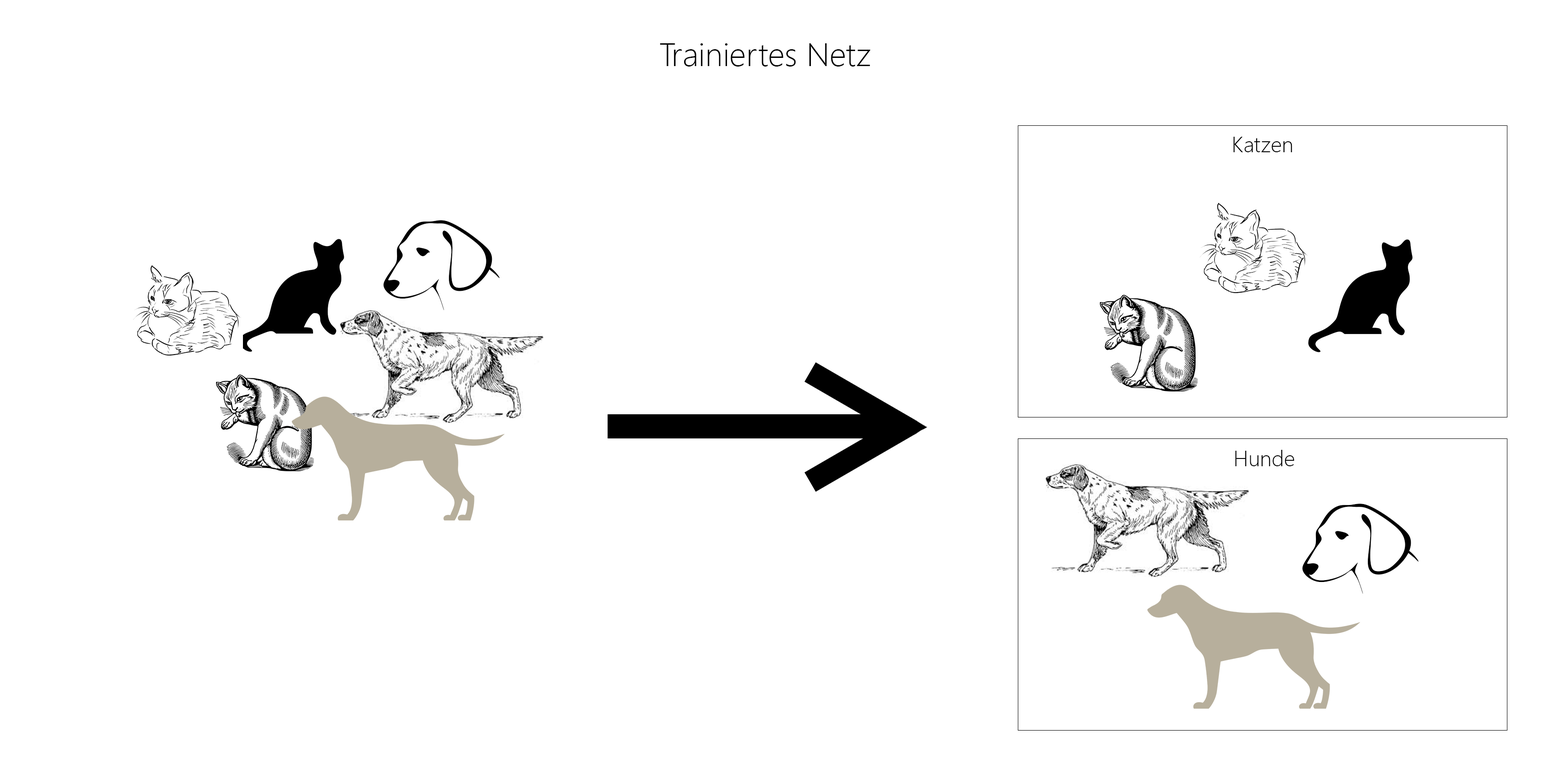
<style>
.page{position:relative;width:1568px;height:757px;background:#ffffff}
.page>*{position:absolute;margin:0}
.t1{font:32.8px "SegoeUI-Light";color:#000000}
.t2{font:21.9px "SegoeUI-Light";color:#000000}
</style>
<div class="page">
<p class="t1" style="left:660px;top:43px;width:211px;height:24px">Trainiertes Netz</p>
<p class="t2" style="left:1233px;top:137px;width:59px;height:15px">Katzen</p>
<p class="t2" style="left:1235px;top:450px;width:60px;height:16px">Hunde</p>
</div>
